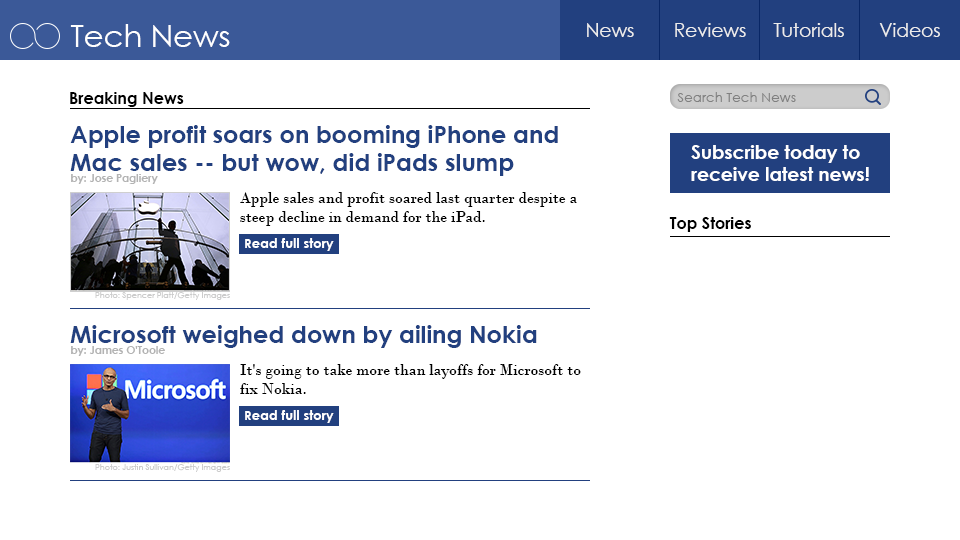
<style>
.page{position:relative;width:960px;height:540px;background:#ffffff}
.page>*{position:absolute;margin:0}
.t1{font:30.7px "CenturyGothic";color:#ffffff}
.t2{font:18.7px "CenturyGothic";color:#ececec}
.t3{font:16px "CenturyGothic-Bold";color:#000000}
.t4{font:13.3px "CenturyGothic";color:#808080}
.t5{font:24px "CenturyGothic-Bold";color:#22407f}
.t6{font:18.7px "CenturyGothic-Bold";color:#ffffff}
.t7{font:10.7px "CenturyGothic-Bold";color:#b3b3b3}
.t8{font:16px "BodoniMT";color:#000000}
.t9{font:13.3px "CenturyGothic-Bold";color:#ffffff}
.t10{font:8px "CenturyGothic";color:#cccccc}
</style>
<div class="page">
<p class="t1" style="left:70px;top:24px;width:160px;height:23px">Tech News</p>
<p class="t2" style="left:587px;top:23px;width:47px;height:14px">News</p>
<p class="t2" style="left:675px;top:23px;width:71px;height:14px">Reviews</p>
<p class="t2" style="left:773px;top:23px;width:71px;height:14px">Tutorials</p>
<p class="t2" style="left:879px;top:23px;width:61px;height:14px">Videos</p>
<p class="t3" style="left:70px;top:92px;width:114px;height:15px">Breaking News</p>
<p class="t4" style="left:677px;top:92px;width:119px;height:10px">Search Tech News</p>
<p class="t5" style="left:70px;top:125px;width:488px;height:51px">Apple profit soars on booming iPhone and <br>Mac sales -- but wow, did iPads slump</p>
<p class="t6" style="left:691px;top:145px;width:178px;height:36px">Subscribe today to<br>receive latest news!</p>
<p class="t7" style="left:71px;top:174px;width:87px;height:10px">by: Jose Pagliery</p>
<p class="t8" style="left:240px;top:192px;width:337px;height:34px">Apple sales and profit soared last quarter despite a <br>steep decline in demand for the iPad.</p>
<p class="t3" style="left:669px;top:217px;width:82px;height:15px">Top Stories</p>
<p class="t9" style="left:245px;top:238px;width:89px;height:13px">Read full story</p>
<p class="t10" style="left:95px;top:292px;width:135px;height:8px">Photo: Spencer Platt/Getty Images</p>
<p class="t5" style="left:70px;top:325px;width:467px;height:23px">Microsoft weighed down by ailing Nokia</p>
<p class="t7" style="left:71px;top:346px;width:94px;height:10px">by: James O'Toole</p>
<p class="t8" style="left:240px;top:364px;width:341px;height:30px">It's going to take more than layoffs for Microsoft to <br>fix Nokia.</p>
<p class="t9" style="left:245px;top:410px;width:89px;height:13px">Read full story</p>
<p class="t10" style="left:95px;top:464px;width:135px;height:8px">Photo: Justin Sullivan/Getty Images</p>
</div>
